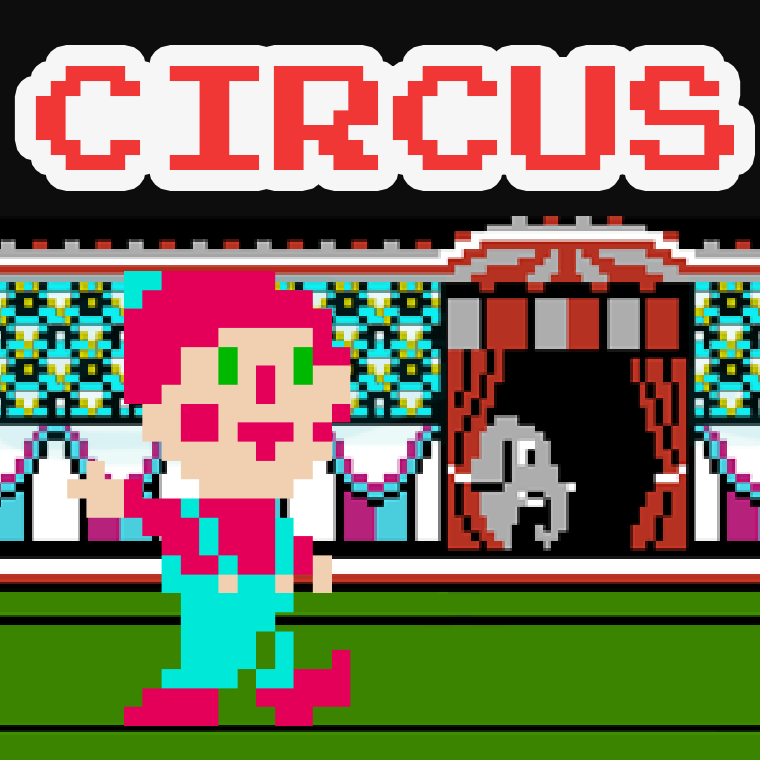
<style>
.page{position:relative;width:760px;height:760px}
.page>*{position:absolute;margin:0}
.t1{font:118.8px "Emulogic";color:#f13636}
</style>
<div class="page">
<p class="t1" style="left:35px;top:66px;width:699px;height:104px">CIRCUS</p>
</div>
